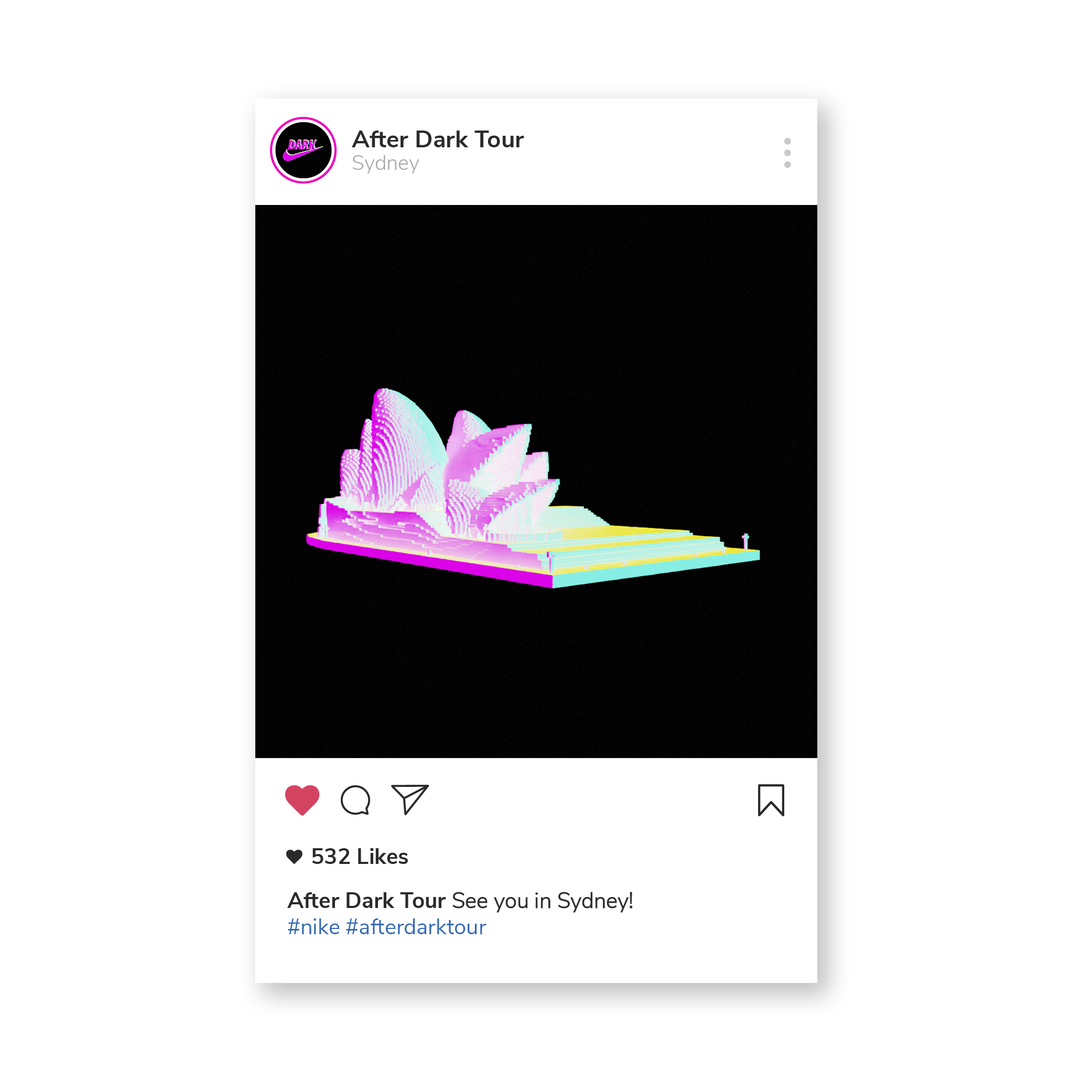
<style>
.page{position:relative;width:1092px;height:1092px;background:#ffffff}
.page>*{position:absolute;margin:0}
.t1{font:24px "NunitoSans-Bold";color:#2a2a2a}
.t2{font:20.7px "NunitoSans-Light";color:#a5a5a5}
.t3{font:22.1px "NunitoSans-Bold";color:#2a2a2a}
.t4{font:21.9px "NunitoSans-Regular";color:#356bb4}
.t5{font:21.9px "NunitoSans-Light";color:#2a2a2a}
</style>
<div class="page">
<p class="t1" style="left:352px;top:131px;width:172px;height:16px">After Dark Tour</p>
<p class="t2" style="left:352px;top:155px;width:67px;height:19px">Sydney</p>
<p class="t3" style="left:312px;top:848px;width:96px;height:16px">532 Likes</p>
<p class="t4" style="left:287px;top:892px;width:345px;height:42px"><span class="t3">After Dark Tour </span><span class="t5">See you in Sydney!<br></span>#nike #afterdarktour</p>
</div>
